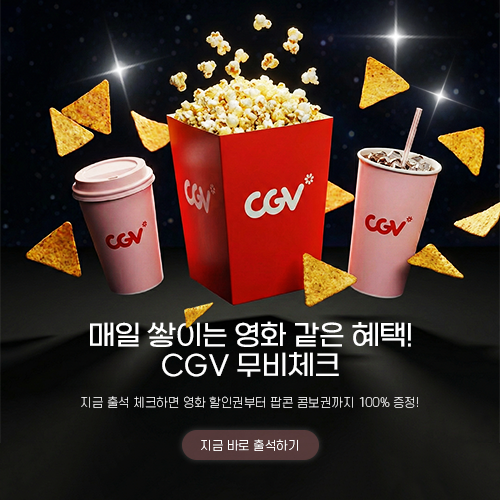
<style>
.page{position:relative;width:500px;height:500px}
.page>*{position:absolute;margin:0}
.t1{font:28px/30px "SBAggroL";color:#ffffff;text-transform:uppercase}
.t2{font:12px "S-CoreDream-1Thin";color:#ffffff;text-transform:uppercase}
.t3{font:12px "S-CoreDream-2ExtraLight";color:#ffffff;text-transform:uppercase}
</style>
<div class="page">
<p class="t1" style="left:90px;top:321px;width:321px;height:56px;text-align:center">매일 쌓이는 영화 같은 혜택!<br>CGV 무비체크</p>
<p class="t2" style="left:81px;top:396px;width:337px;height:12px">지금 출석 체크하면 영화 할인권부터 팝콘 콤보권까지 100% 증정!</p>
<p class="t3" style="left:201px;top:439px;width:97px;height:12px">지금 바로 출석하기</p>
</div>
